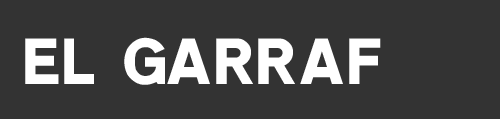
<style>
.page{position:relative;width:500px;height:119px;background:#333333}
.page>*{position:absolute;margin:0}
.t1{font:64px "Ccrige-Regular";color:#ffffff}
</style>
<div class="page">
<p class="t1" style="left:25px;top:37px;width:356px;height:48px">EL GARRAF</p>
</div>
